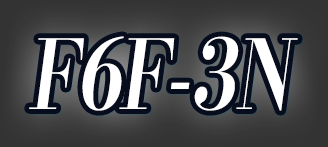
<style>
.page{position:relative;width:328px;height:147px}
.page>*{position:absolute;margin:0}
.t1{font:96px "KochoStd-Heavy";color:#ffffff;font-style:italic;scale:0.75 1}
</style>
<div class="page">
<p class="t1" style="left:29px;top:36px;width:269px;height:75px">F6F-3N</p>
</div>
